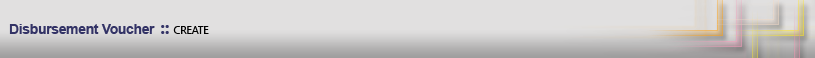
<style>
.page{position:relative;width:815px;height:58px;background:#e1e0e0}
.page>*{position:absolute;margin:0}
.t1{font:14px "Arial-BoldMT";letter-spacing:-0.025em;color:#333366}
.t2{font:18px "SegoeUI-Bold";letter-spacing:-0.025em;color:#333366}
.t3{font:11px "SegoeUI";letter-spacing:-0.025em;color:#010101}
</style>
<div class="page">
<p class="t1" style="left:9px;top:24px;width:200px;height:10px">Disbursement Voucher <span class="t2">:: </span><span class="t3">CREATE</span></p>
</div>
